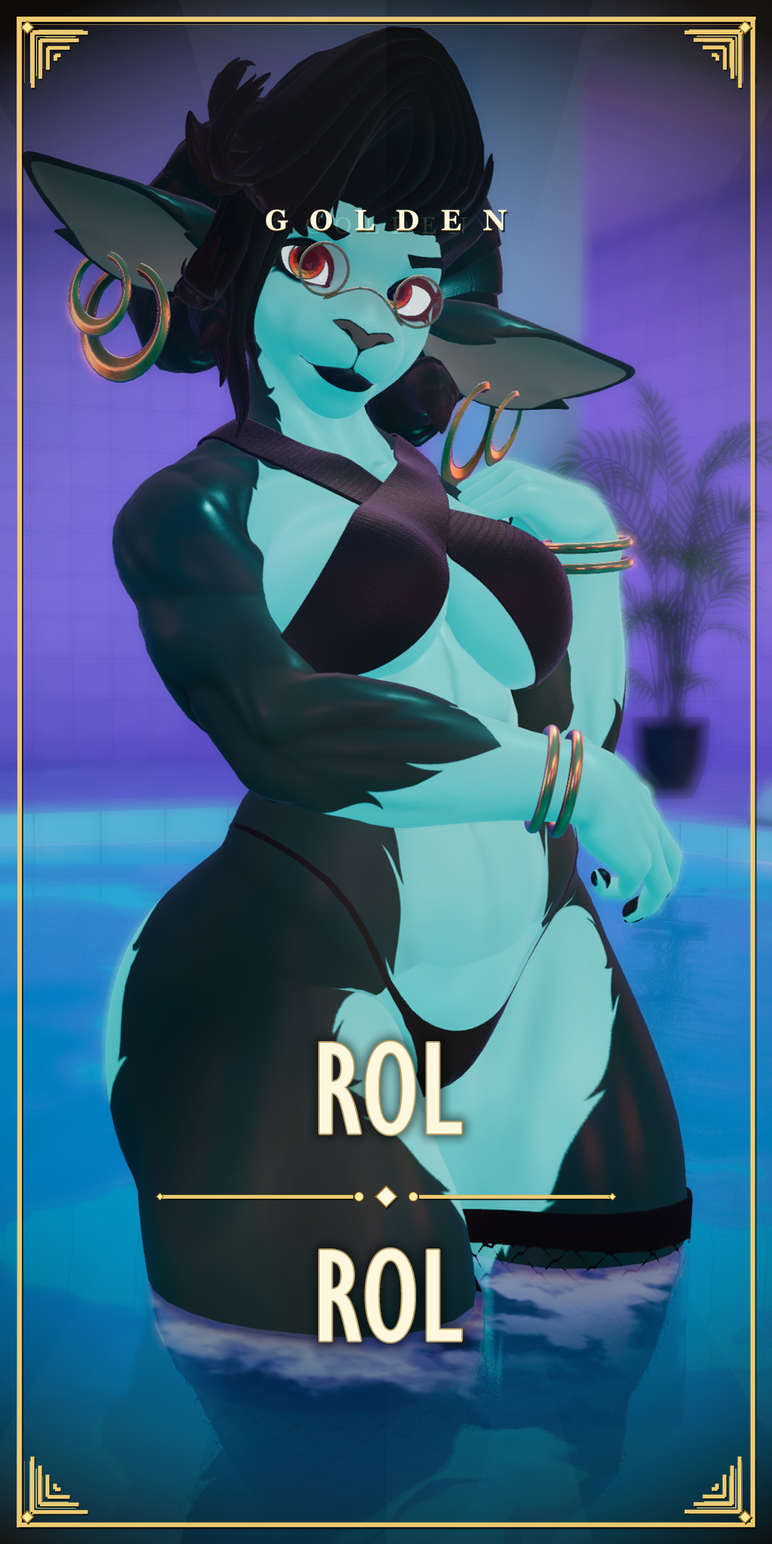
<style>
.page{position:relative;width:772px;height:1544px}
.page>*{position:absolute;margin:0}
.t1{font:135.7px "GillSansMT-Condensed";color:#fff8de}
</style>
<div class="page">
<p class="t1" style="left:320px;top:1041px;width:141px;height:94px">ROL</p>
<p class="t1" style="left:320px;top:1249px;width:141px;height:93px">ROL</p>
</div>
